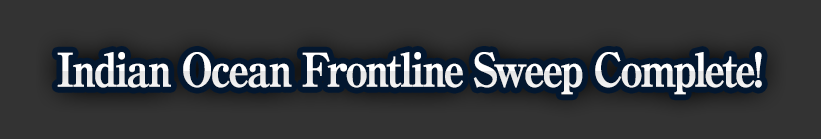
<style>
.page{position:relative;width:821px;height:139px;background:#333333}
.page>*{position:absolute;margin:0}
.t1{font:46px "RyuminPro-ExBold";letter-spacing:-0.08em;color:#ffffff;font-weight:bold;scale:0.9 1}
</style>
<div class="page">
<p class="t1" style="left:57px;top:52px;width:705px;height:43px">Indian Ocean Frontline Sweep Complete!</p>
</div>
